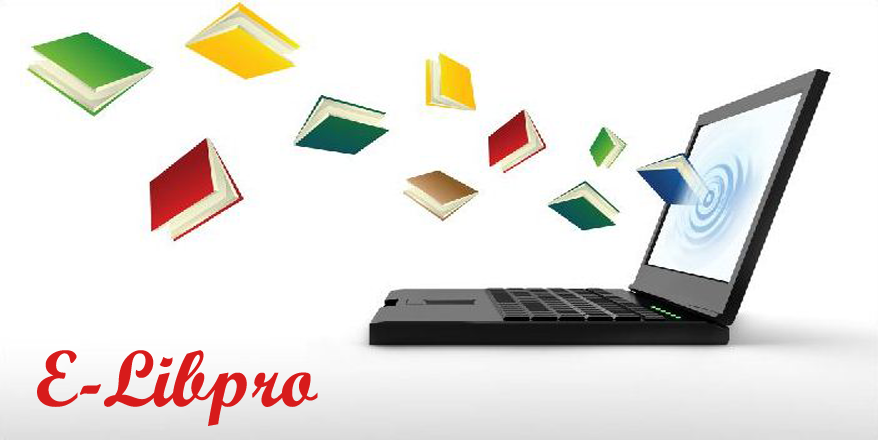
<style>
.page{position:relative;width:878px;height:440px;background:#ffffff}
.page>*{position:absolute;margin:0}
.t1{font:79.8px "ScriptMTBold";color:#d71b1b}
</style>
<div class="page">
<p class="t1" style="left:37px;top:350px;width:281px;height:76px">E-Libpro</p>
</div>
